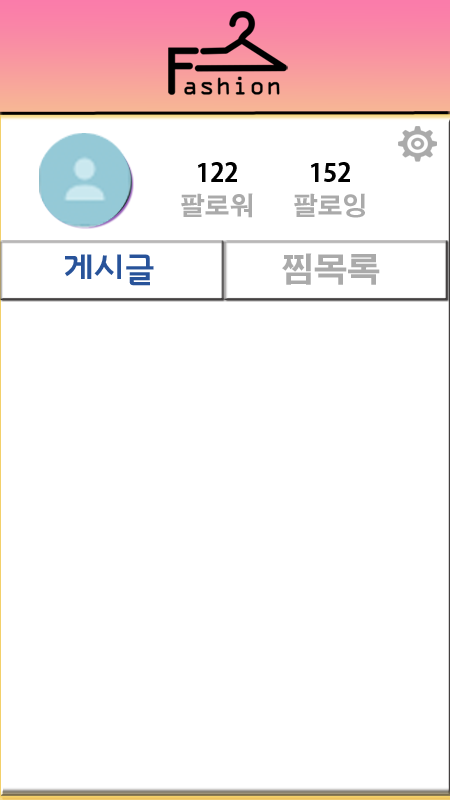
<style>
.page{position:relative;width:450px;height:800px;background:#ffffff}
.page>*{position:absolute;margin:0}
.t1{font:25px "AdobeGothicStd-Bold";color:#000000}
.t2{font:25px "AdobeGothicStd-Bold";color:#aaaaaa}
.t3{font:33.3px "InterGTB";color:#28539a}
.t4{font:33.3px "AdobeGothicStd-Bold";color:#aaaaaa}
</style>
<div class="page">
<p class="t1" style="left:198px;top:162px;width:39px;height:20px">122</p>
<p class="t1" style="left:311px;top:162px;width:39px;height:20px">152</p>
<p class="t2" style="left:181px;top:193px;width:72px;height:25px">팔로워</p>
<p class="t2" style="left:294px;top:193px;width:71px;height:25px">팔로잉</p>
<p class="t3" style="left:65px;top:254px;width:89px;height:32px">게시글</p>
<p class="t4" style="left:282px;top:253px;width:98px;height:32px">찜목록</p>
</div>
